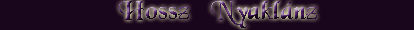
<style>
.page{position:relative;width:414px;height:30px;background:#19051c}
.page>*{position:absolute;margin:0}
.t1{font:28px "BlackChancery"}
.t2{font:24.8px "BlackChancery"}
</style>
<div class="page">
<p class="t1" style="left:119px;top:1px;width:198px;height:27px"><span class="t2">            </span>Hossz   Nyaklánz</p>
</div>
